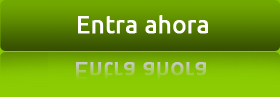
<style>
.page{position:relative;width:280px;height:97px}
.page>*{position:absolute;margin:0}
.t1{font:24px "Ubuntu";color:#ffffff;font-weight:bold}
.t2{font:24px "Ubuntu";font-weight:bold}
</style>
<div class="page">
<p class="t1" style="left:78px;top:15px;width:130px;height:19px">Entra ahora</p>
<p class="t2" style="left:76px;top:62px;width:130px;height:19px">Entra ahora</p>
</div>
